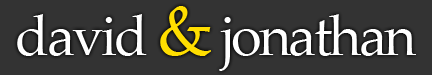
<style>
.page{position:relative;width:432px;height:75px;background:#333333}
.page>*{position:absolute;margin:0}
.t1{font:56px "PalatinoLinotype-Roman";letter-spacing:-0.05em;color:#ffffff}
.t2{font:72px "PalatinoLinotype-Roman";letter-spacing:-0.05em;color:#ffde00}
</style>
<div class="page">
<p class="t1" style="left:17px;top:6px;width:399px;height:65px">david <span class="t2">&amp;</span> jonathan</p>
</div>
